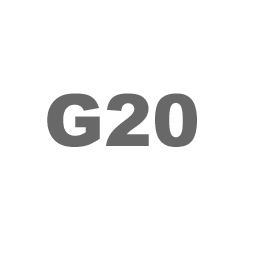
<style>
.page{position:relative;width:256px;height:256px;background:#ffffff}
.page>*{position:absolute;margin:0}
.t1{font:72px "Arial-Black";color:#696868}
</style>
<div class="page">
<p class="t1" style="left:47px;top:93px;width:150px;height:54px">G20</p>
</div>
